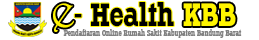
<style>
.page{position:relative;width:259px;height:40px;background:#ffffff}
.page>*{position:absolute;margin:0}
.t1{font:48px "Harrington";color:#fff500}
.t2{font:30px "Typodermic-Regular";color:#000000}
.t3{font:30px "Typodermic-Regular";color:#fff500}
.t4{font:7px "Typodermic-Regular";color:#818181}
</style>
<div class="page">
<p class="t1" style="left:53px;top:3px;width:21px;height:29px">e</p>
<p class="t2" style="left:74px;top:2px;width:100px;height:25px">- Health</p>
<p class="t3" style="left:183px;top:3px;width:53px;height:23px">KBB</p>
<p class="t4" style="left:63px;top:29px;width:179px;height:9px">Pendaftaran Online Rumah Sakit Kabupaten Bandung Barat</p>
</div>
